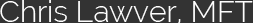
<style>
.page{position:relative;width:253px;height:23px;background:#333333}
.page>*{position:absolute;margin:0}
.t1{font:30px "Raleway-Light";color:#ffffff}
</style>
<div class="page">
<p class="t1" style="left:0px;top:0px;width:253px;height:23px">Chris Lawver, MFT</p>
</div>
